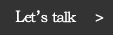
<style>
.page{position:relative;width:113px;height:35px;background:#333333}
.page>*{position:absolute;margin:0}
.t1{font:14.6px "STZhongsong";letter-spacing:-0.075em;color:#ffffff}
.t2{font:16.7px "STZhongsong";letter-spacing:-0.075em;color:#ffffff}
.t3{font:14.6px "STZhongsong";letter-spacing:-0.6em;color:#ffffff}
.t4{font:16.7px "STZhongsong";color:#ffffff}
</style>
<div class="page">
<p class="t1" style="left:15px;top:10px;width:62px;height:13px"><span class="t2">L</span>et<span class="t3">’s   </span>talk</p>
<p class="t4" style="left:95px;top:14px;width:9px;height:8px">&gt;</p>
</div>
